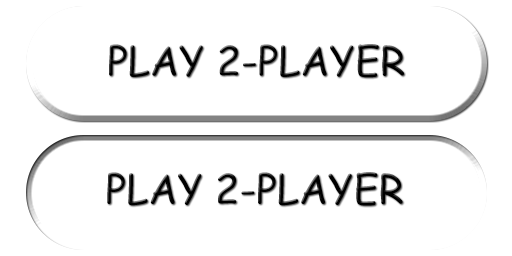
<style>
.page{position:relative;width:512px;height:256px;background:#ffffff}
.page>*{position:absolute;margin:0}
.t1{font:40px "ComicSansMS";color:#000000}
.t2{font:40.3px "ComicSansMS";color:#000000}
</style>
<div class="page">
<p class="t1" style="left:109px;top:44px;width:295px;height:34px">PLAY 2-PLAYER</p>
<p class="t2" style="left:107px;top:172px;width:296px;height:34px">PLAY 2-PLAYER</p>
</div>
